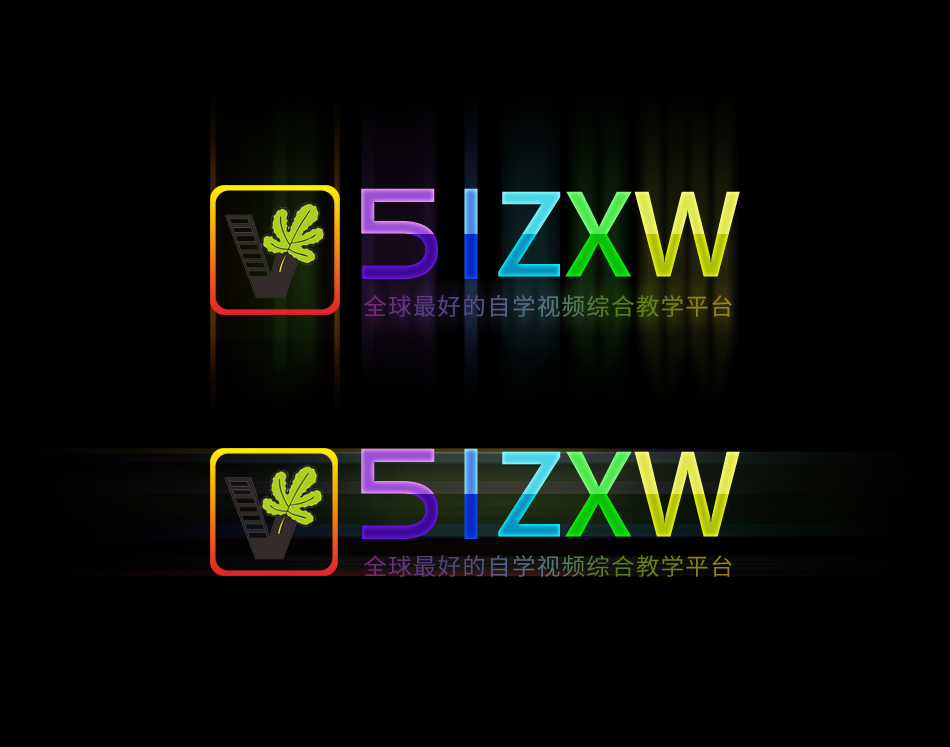
<style>
.page{position:relative;width:950px;height:747px;background:#000000}
.page>*{position:absolute;margin:0}
.t1{font:23.6px "SourceHanSansCN-Regular";letter-spacing:0.05em}
</style>
<div class="page">
<p class="t1" style="left:364px;top:295px;width:368px;height:22px">全球最好的自学视频综合教学平台</p>
</div>
